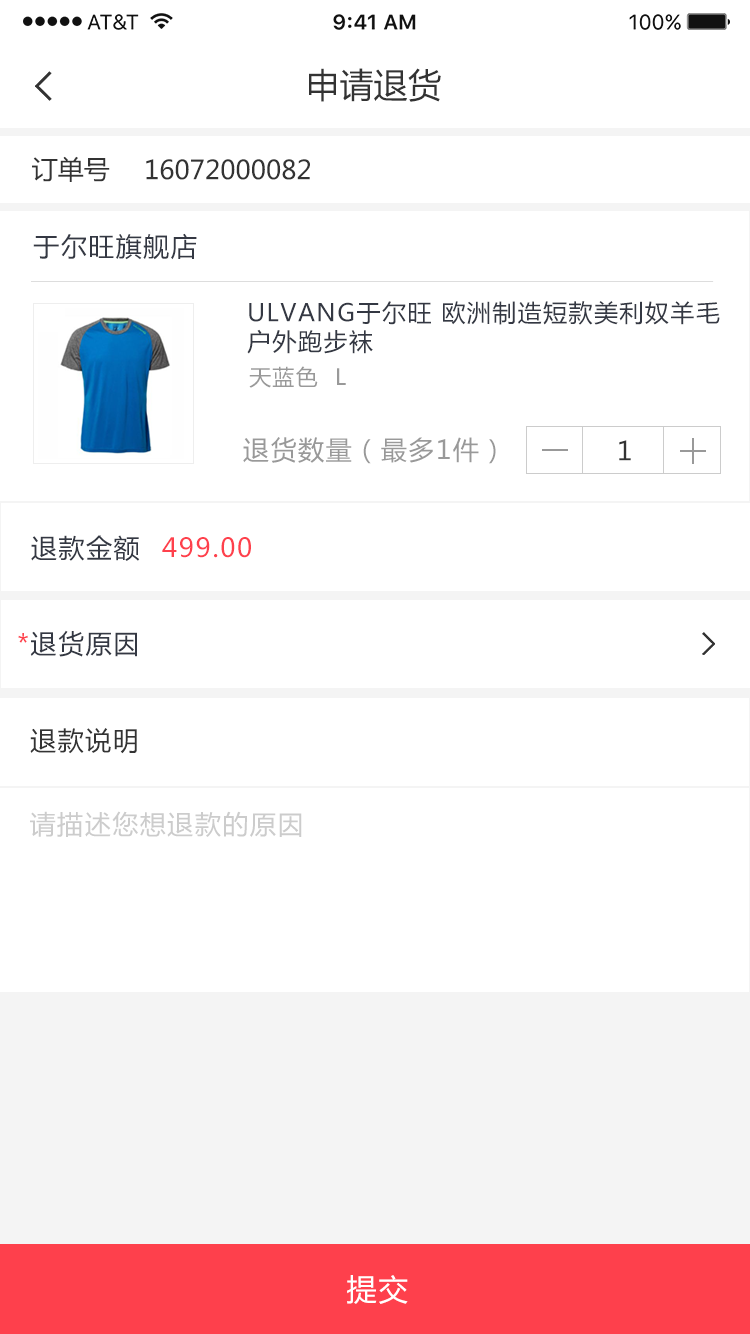
<style>
.page{position:relative;width:750px;height:1334px;background:#ffffff}
.page>*{position:absolute;margin:0}
.t1{font:34px "MicrosoftYaHei";color:#333333}
.t2{font:26px "MicrosoftYaHei";color:#333333}
.t3{font:26px "MicrosoftYaHei";letter-spacing:0.06em;color:#343843}
.t4{font:24px "MicrosoftYaHei";letter-spacing:0.06em;color:#343843}
.t5{font:22px "MicrosoftYaHei";letter-spacing:0.06em;color:#999999}
.t6{font:26px "MicrosoftYaHei";letter-spacing:0.06em;color:#999999}
.t7{font:26px "MicrosoftYaHei";letter-spacing:0.06em;color:#333333}
.t8{font:26px "MicrosoftYaHei";letter-spacing:0.06em;color:#fe404c}
.t9{font:26px "MicrosoftYaHei";letter-spacing:0.06em;color:#cccccc}
.t10{font:30px "MicrosoftYaHei";letter-spacing:0.06em;color:#ffffff}
</style>
<div class="page">
<p class="t1" style="left:309px;top:68px;width:132px;height:34px">申请退货</p>
<p class="t2" style="left:32px;top:156px;width:78px;height:26px">订单号</p>
<p class="t2" style="left:146px;top:159px;width:164px;height:21px">16072000082</p>
<p class="t3" style="left:33px;top:233px;width:164px;height:27px">于尔旺旗舰店</p>
<p class="t4" style="left:247px;top:301px;width:473px;height:53px">ULVANG于尔旺 欧洲制造短款美利奴羊毛户外跑步袜</p>
<p class="t5" style="left:249px;top:366px;width:97px;height:22px">天蓝色  L</p>
<p class="t6" style="left:243px;top:437px;width:253px;height:27px">退货数量（最多1件）</p>
<p class="t7" style="left:619px;top:440px;width:12px;height:21px">1</p>
<p class="t3" style="left:31px;top:535px;width:109px;height:26px">退款金额</p>
<p class="t8" style="left:162px;top:537px;width:89px;height:21px">499.00</p>
<p class="t3" style="left:18px;top:630px;width:119px;height:27px"><span class="t8">*</span>退货原因</p>
<p class="t7" style="left:30px;top:728px;width:107px;height:26px">退款说明</p>
<p class="t9" style="left:30px;top:811px;width:272px;height:26px">请描述您想退款的原因</p>
<p class="t10" style="left:347px;top:1275px;width:61px;height:29px">提交</p>
</div>
